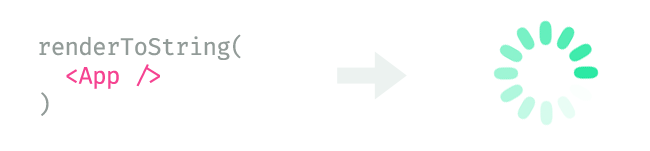
<style>
.page{position:relative;width:650px;height:151px;background:#ffffff}
.page>*{position:absolute;margin:0}
.t1{font:24px "FiraCode-Regular";letter-spacing:-0.025em;color:#929b98}
.t2{font:24px "FiraCode-Regular";letter-spacing:-0.025em;color:#f54391}
</style>
<div class="page">
<p class="t1" style="left:39px;top:34px;width:202px;height:82px">renderToString(<br>  <span class="t2">&lt;App /&gt;<br></span>)</p>
</div>
